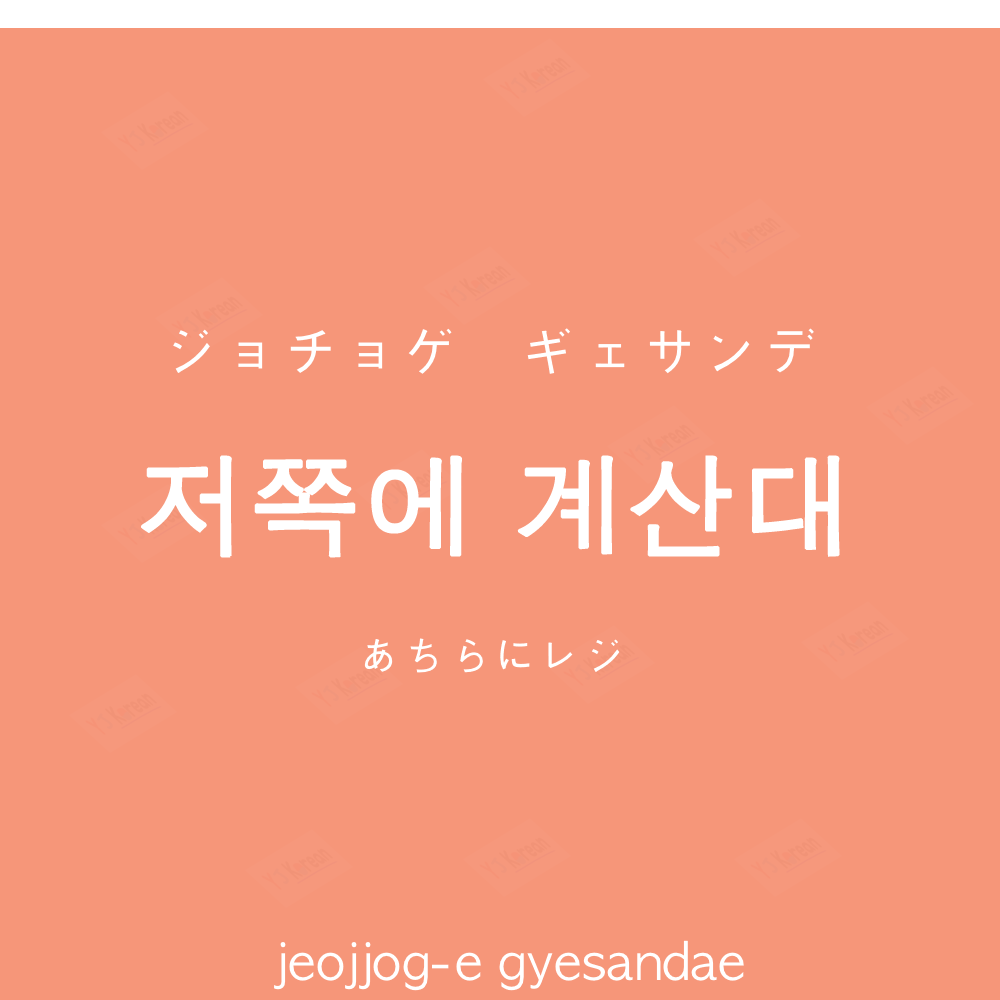
<style>
.page{position:relative;width:1000px;height:1000px;background:#f69679}
.page>*{position:absolute;margin:0}
.t1{font:60px "AppleGothic";color:#ffffff}
.t2{font:110px "AppleGothic";color:#ffffff;font-weight:bold}
.t3{font:45px "AppleGothic";color:#ffffff}
.t4{font:50px "AppleGothic";color:#ffffff}
</style>
<div class="page">
<p class="t1" style="left:173px;top:328px;width:641px;height:46px">ジョチョゲ　ギェサンデ</p>
<p class="t2" style="left:141px;top:455px;width:699px;height:103px">저쪽에 계산대</p>
<p class="t3" style="left:364px;top:638px;width:256px;height:35px">あちらにレジ</p>
<p class="t4" style="left:274px;top:940px;width:470px;height:51px">jeojjog-e gyesandae</p>
</div>
